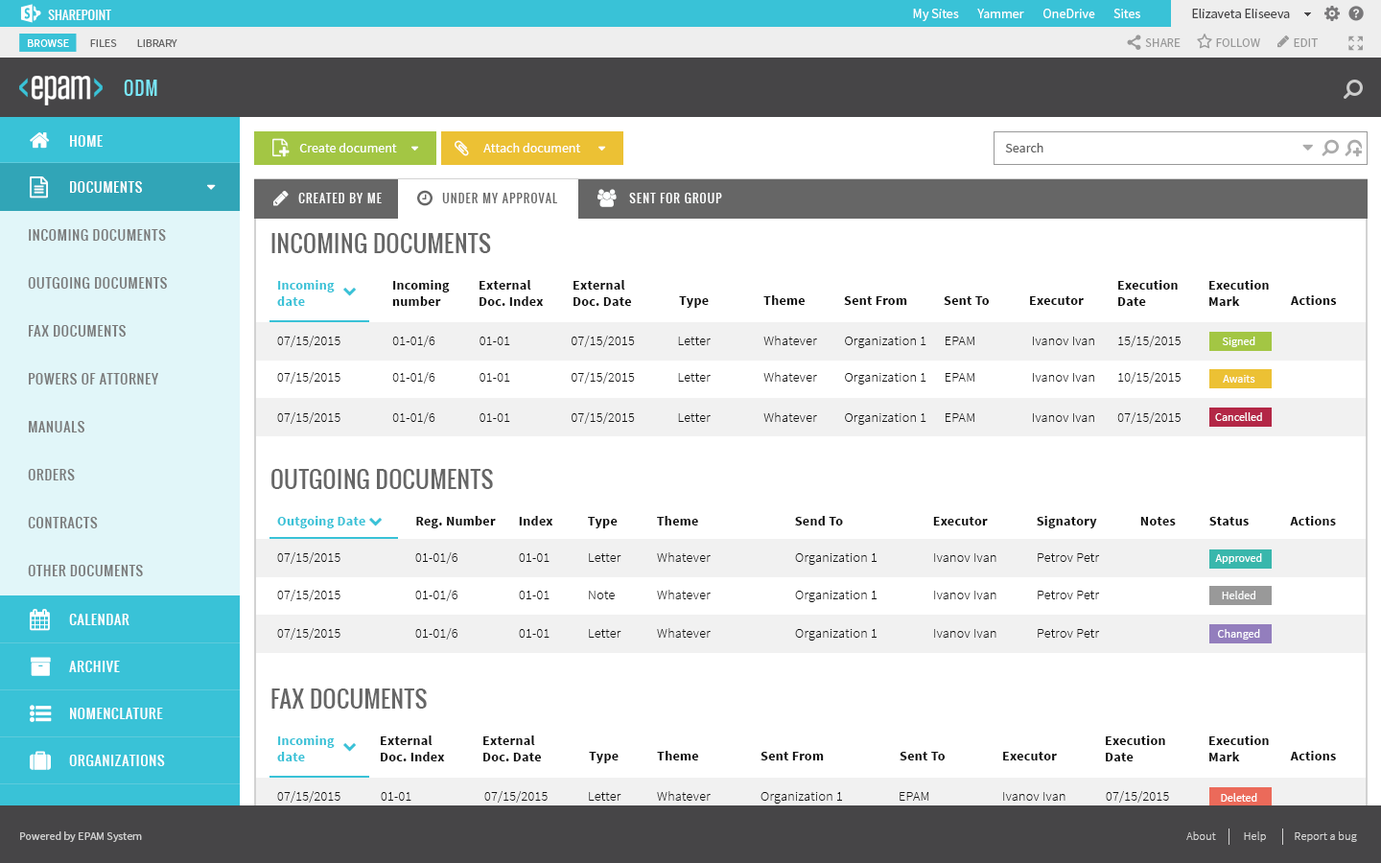
<style>
.page{position:relative;width:1381px;height:863px;background:#ffffff}
.page>*{position:absolute;margin:0}
.t1{font:17.3px "Oswald-Regular";letter-spacing:0.06em;color:#7ae6f7;text-transform:uppercase}
.t2{font:13.4px "Oswald-Regular";letter-spacing:0.06em;color:#ffffff}
.t3{font:13.4px "SourceSansPro-Regular";color:#feffff}
.t4{font:13.4px "SourceSansPro-Regular";color:#5e5e5e}
.t5{font:13.4px "Oswald-Regular";letter-spacing:0.06em;color:#ffffff;text-transform:uppercase}
.t6{font:11.5px "Oswald-Regular";letter-spacing:0.1em;color:#feffff;text-transform:uppercase}
.t7{font:11.5px "Oswald-Regular";letter-spacing:0.1em;color:#666666;text-transform:uppercase}
.t8{font:13.4px/48px "Oswald-Regular";letter-spacing:0.06em;color:#7a7a7a;text-transform:uppercase}
.t9{font:23px "Oswald-Regular";letter-spacing:0.02em;color:#666666;text-transform:uppercase}
.t10{font:13.4px "SourceSansPro-Bold";letter-spacing:0.02em;color:#39c2d7}
.t11{font:13.4px "SourceSansPro-Bold";letter-spacing:0.02em;color:#111111}
.t12{font:13.4px "SourceSansPro-Light";letter-spacing:0.02em;color:#111111}
.t13{font:11.5px "SourceSansPro-Regular";color:#feffff}
.t14{font:11.5px "SourceSansPro-Light";letter-spacing:0.02em;color:#d4d4d4}
</style>
<div class="page">
<p class="t1" style="left:124px;top:80px;width:33px;height:16px">odm</p>
<p class="t2" style="left:70px;top:135px;width:33px;height:12px">HOME</p>
<p class="t3" style="left:299px;top:143px;width:98px;height:10px">Create document</p>
<p class="t3" style="left:483px;top:143px;width:98px;height:10px">Attach document</p>
<p class="t4" style="left:1005px;top:143px;width:39px;height:10px">Search</p>
<p class="t5" style="left:70px;top:181px;width:72px;height:12px">DOCUMENTS</p>
<p class="t6" style="left:298px;top:193px;width:84px;height:10px">created by me</p>
<p class="t7" style="left:442px;top:193px;width:115px;height:10px">under my approval</p>
<p class="t6" style="left:629px;top:193px;width:93px;height:10px">sent for group</p>
<p class="t8" style="left:28px;top:229px;width:139px;height:347px">Incoming DOCUMENTS<br>outgoing DOCUMENTS<br>fax DOCUMENTS<br>Powers of attorney<br>manuals<br>Orders<br>contracts<br>Other documents</p>
<p class="t9" style="left:271px;top:233px;width:220px;height:20px">incoming documents</p>
<p class="t10" style="left:277px;top:280px;width:58px;height:26px">Incoming<br>date</p>
<p class="t11" style="left:392px;top:280px;width:58px;height:26px">Incoming<br>number</p>
<p class="t11" style="left:480px;top:280px;width:64px;height:26px">External<br>Doc. Index</p>
<p class="t11" style="left:574px;top:280px;width:58px;height:26px">External<br>Doc. Date</p>
<p class="t11" style="left:1118px;top:280px;width:60px;height:26px">Execution<br>Date</p>
<p class="t11" style="left:1210px;top:280px;width:59px;height:26px">Execution<br>Mark</p>
<p class="t11" style="left:679px;top:296px;width:30px;height:12px">Type</p>
<p class="t11" style="left:764px;top:295px;width:42px;height:10px">Theme</p>
<p class="t11" style="left:844px;top:296px;width:63px;height:9px">Sent From</p>
<p class="t11" style="left:944px;top:296px;width:46px;height:9px">Sent To</p>
<p class="t11" style="left:1030px;top:296px;width:54px;height:9px">Executor</p>
<p class="t11" style="left:1290px;top:295px;width:47px;height:10px">Actions</p>
<p class="t12" style="left:277px;top:336px;width:904px;height:12px">07/15/2015      01-01/6           01-01        07/15/2015        Letter   Whatever      Organization 1      EPAM           Ivanov Ivan     15/15/2015</p>
<p class="t13" style="left:1222px;top:337px;width:34px;height:10px">Signed</p>
<p class="t12" style="left:277px;top:372px;width:904px;height:13px">07/15/2015      01-01/6           01-01        07/15/2015        Letter   Whatever      Organization 1      EPAM           Ivanov Ivan     10/15/2015</p>
<p class="t13" style="left:1223px;top:375px;width:33px;height:8px">Awaits</p>
<p class="t12" style="left:277px;top:412px;width:904px;height:13px">07/15/2015      01-01/6           01-01        07/15/2015        Letter   Whatever      Organization 1      EPAM           Ivanov Ivan     07/15/2015</p>
<p class="t13" style="left:1215px;top:412px;width:47px;height:9px">Cancelled</p>
<p class="t9" style="left:271px;top:469px;width:222px;height:20px">outgoing documents</p>
<p class="t12" style="left:277px;top:553px;width:823px;height:12px">07/15/2015   01-01/6  01-01  Letter  Whatever   Organization 1  Ivanov Ivan  Petrov Petr</p>
<p class="t13" style="left:1215px;top:553px;width:47px;height:11px">Approved</p>
<p class="t12" style="left:277px;top:590px;width:823px;height:12px">07/15/2015   01-01/6  01-01  Note  Whatever   Organization 1  Ivanov Ivan  Petrov Petr</p>
<p class="t13" style="left:1222px;top:591px;width:34px;height:9px">Helded</p>
<p class="t5" style="left:69px;top:614px;width:60px;height:11px">CALENDAR</p>
<p class="t12" style="left:277px;top:628px;width:823px;height:13px">07/15/2015   01-01/6  01-01  Letter  Whatever   Organization 1  Ivanov Ivan  Petrov Petr</p>
<p class="t13" style="left:1218px;top:629px;width:42px;height:11px">Changed</p>
<p class="t5" style="left:69px;top:661px;width:51px;height:11px">ARCHIVE</p>
<p class="t9" style="left:271px;top:689px;width:156px;height:20px">fax documents</p>
<p class="t5" style="left:70px;top:708px;width:93px;height:11px">Nomenclature</p>
<p class="t10" style="left:277px;top:736px;width:58px;height:26px">Incoming<br>date</p>
<p class="t11" style="left:381px;top:736px;width:64px;height:26px">External<br>Doc. Index</p>
<p class="t11" style="left:483px;top:736px;width:59px;height:26px">External<br>Doc. Date</p>
<p class="t11" style="left:1106px;top:736px;width:59px;height:26px">Execution<br>Date</p>
<p class="t11" style="left:1210px;top:736px;width:59px;height:26px">Execution<br>Mark</p>
<p class="t5" style="left:69px;top:755px;width:96px;height:11px">Organizations</p>
<p class="t11" style="left:589px;top:752px;width:30px;height:12px">Type</p>
<p class="t11" style="left:657px;top:751px;width:42px;height:10px">Theme</p>
<p class="t11" style="left:761px;top:752px;width:63px;height:9px">Sent From</p>
<p class="t11" style="left:900px;top:752px;width:46px;height:9px">Sent To</p>
<p class="t11" style="left:1003px;top:752px;width:54px;height:9px">Executor</p>
<p class="t11" style="left:1290px;top:751px;width:46px;height:10px">Actions</p>
<p class="t12" style="left:277px;top:791px;width:892px;height:13px">07/15/2015  01-01   07/15/2015  Letter  Whatever  Organization 1  EPAM   Ivanov Ivan  07/15/2015</p>
<p class="t13" style="left:1221px;top:793px;width:37px;height:9px">Deleted</p>
<p class="t14" style="left:1187px;top:832px;width:29px;height:8px">About</p>
<p class="t14" style="left:1244px;top:832px;width:22px;height:10px">Help</p>
<p class="t14" style="left:1295px;top:832px;width:62px;height:10px">Report a bug</p>
</div>
